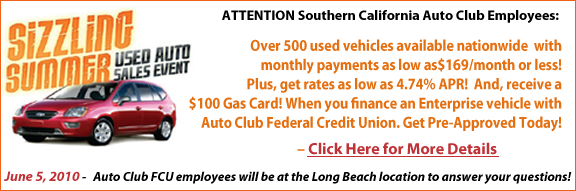
<style>
.page{position:relative;width:576px;height:191px;background:#ffffff}
.page>*{position:absolute;margin:0}
.t1{font:14px "MyriadPro-Bold";color:#000000}
.t2{font:16px "MyriadPro-Bold";color:#e47012;scale:0.88 1}
.t3{font:16px "MyriadPro-Bold";color:#bf3236}
.t4{font:16px "MyriadPro-Bold";color:#e47012}
.t5{font:13px "MyriadPro-BoldIt";color:#000000}
.t6{font:14px "MyriadPro-BoldIt";color:#bf3236}
</style>
<div class="page">
<p class="t1" style="left:222px;top:10px;width:337px;height:13px">ATTENTION Southern California Auto Club Employees:</p>
<p class="t2" style="left:189px;top:39px;width:373px;height:93px;text-align:right">Over 500 used vehicles available nationwide  with <br>monthly payments as low as$169/month or less! <br>Plus, get rates as low as 4.74% APR!  And, receive a <br>$100 Gas Card! When you finance an Enterprise vehicle with <br>Auto Club Federal Credit Union. Get Pre-Approved Today!</p>
<p class="t3" style="left:297px;top:142px;width:200px;height:13px"><span class="t4">– </span>Click Here for More Details</p>
<p class="t5" style="left:4px;top:171px;width:568px;height:13px"><span class="t6">June 5, 2010</span> -   Auto Club FCU employees will be at the Long Beach location to answer your questions!</p>
</div>
